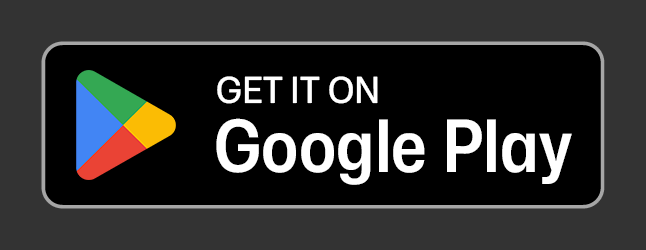
<style>
.page{position:relative;width:646px;height:250px;background:#000000}
.page>*{position:absolute;margin:0}
.t1{font:36px "MonaSans_95.000wdth_500.000wght";color:#ffffff}
.t2{font:72px "MonaSans_90.000wdth_600.000wght";color:#ffffff}
</style>
<div class="page">
<p class="t1" style="left:217px;top:76px;width:161px;height:28px">GET IT ON</p>
<p class="t2" style="left:216px;top:118px;width:356px;height:67px">Google Play</p>
</div>
